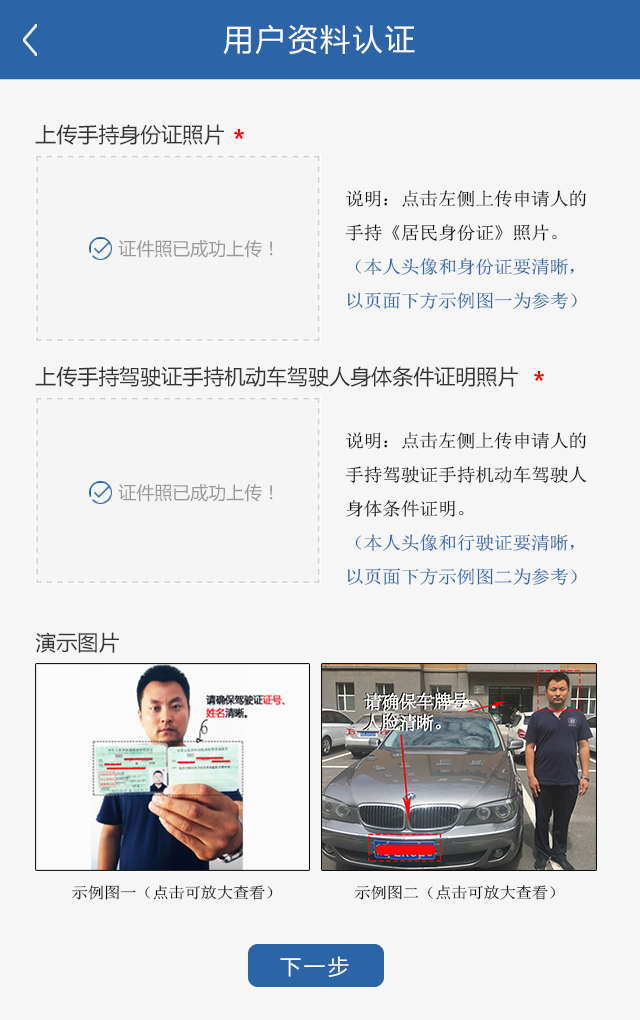
<style>
.page{position:relative;width:640px;height:1020px;background:#f6f6f6}
.page>*{position:absolute;margin:0}
.t1{font:30px "MicrosoftYaHei";letter-spacing:0.08em;color:#ffffff}
.t2{font:21px "MicrosoftYaHei";color:#353535}
.t3{font:18px/34px "SimSun";letter-spacing:-0.02em;color:#2b65a7;scale:1.06 1}
.t4{font:18px/34px "SimSun";letter-spacing:-0.02em;color:#060606;scale:1.06 1}
.t5{font:18px "MicrosoftYaHei";color:#999999}
.t6{font:15.6px "SimSun";letter-spacing:-0.02em;color:#000000;scale:1.06 1}
.t7{font:21px "MicrosoftYaHei";letter-spacing:0.14em;color:#ffffff}
</style>
<div class="page">
<p class="t1" style="left:223px;top:24px;width:192px;height:31px">用户资料认证</p>
<p class="t2" style="left:35px;top:124px;width:189px;height:21px">上传手持身份证照片</p>
<p class="t3" style="left:345px;top:190px;width:241px;height:119px"><span class="t4">说明：点击左侧上传申请人的手持《居民身份证》照片。<br></span>（本人头像和身份证要清晰，以页面下方示例图一为参考）</p>
<p class="t5" style="left:118px;top:240px;width:155px;height:18px">证件照已成功上传！</p>
<p class="t2" style="left:35px;top:366px;width:483px;height:21px">上传手持驾驶证手持机动车驾驶人身体条件证明照片</p>
<p class="t4" style="left:345px;top:432px;width:242px;height:153px">说明：点击左侧上传申请人的手持驾驶证手持机动车驾驶人身体条件证明。<br><span class="t3">（本人头像和行驶证要清晰，以页面下方示例图二为参考）</span></p>
<p class="t5" style="left:118px;top:484px;width:155px;height:18px">证件照已成功上传！</p>
<p class="t2" style="left:35px;top:632px;width:84px;height:21px">演示图片</p>
<p class="t6" style="left:72px;top:885px;width:201px;height:15px">示例图一（点击可放大查看）</p>
<p class="t6" style="left:355px;top:885px;width:200px;height:15px">示例图二（点击可放大查看）</p>
<p class="t7" style="left:280px;top:956px;width:69px;height:21px">下一步</p>
</div>
